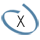
<style>
.page{position:relative;width:40px;height:40px;background:#ffffff}
.page>*{position:absolute;margin:0}
.t1{font:16.8px "Champagne&Limousines-Bold";color:#333333;scale:0.95 1}
</style>
<div class="page">
<p class="t1" style="left:16px;top:15px;width:9px;height:12px">X</p>
</div>
